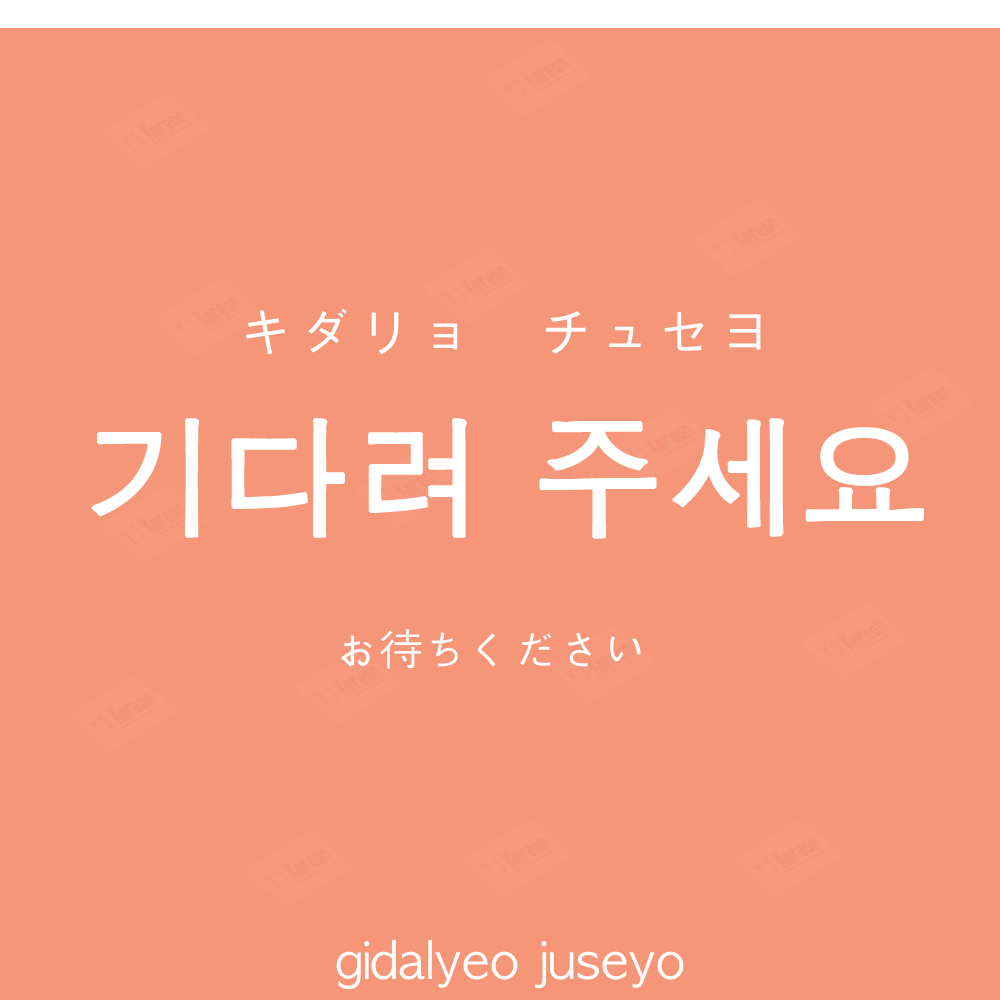
<style>
.page{position:relative;width:1000px;height:1000px;background:#f69679}
.page>*{position:absolute;margin:0}
.t1{font:60px "AppleGothic";color:#ffffff}
.t2{font:130px "AppleGothic";color:#ffffff;font-weight:bold}
.t3{font:45px "AppleGothic";color:#ffffff}
.t4{font:50px "AppleGothic";color:#ffffff}
</style>
<div class="page">
<p class="t1" style="left:246px;top:308px;width:515px;height:47px">キダリョ　チュセヨ</p>
<p class="t2" style="left:91px;top:418px;width:833px;height:121px">기다려 주세요</p>
<p class="t3" style="left:341px;top:629px;width:300px;height:40px">お待ちください</p>
<p class="t4" style="left:336px;top:939px;width:348px;height:51px">gidalyeo juseyo</p>
</div>
